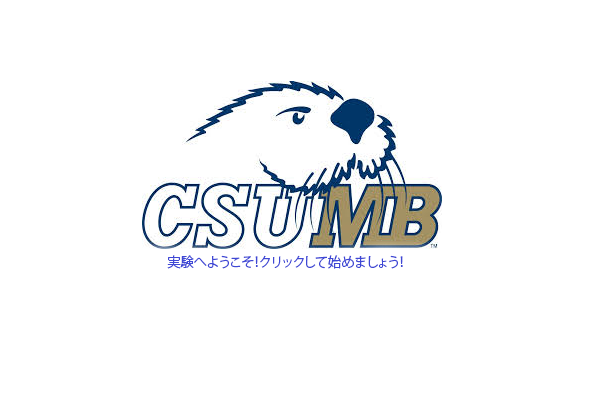
<style>
.page{position:relative;width:616px;height:402px;background:#ffffff}
.page>*{position:absolute;margin:0}
.t1{font:13.3px "KozGoPr6N-Regular";color:#3f48d5}
</style>
<div class="page">
<p class="t1" style="left:167px;top:255px;width:236px;height:14px">実験へようこそ！クリックして始めましょう！</p>
</div>
